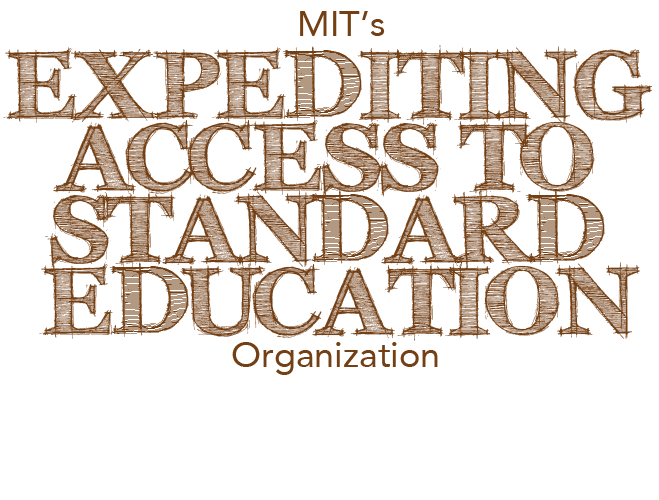
<style>
.page{position:relative;width:659px;height:500px;background:#ffffff}
.page>*{position:absolute;margin:0}
.t1{font:36px "Avenir-Roman";color:#733f14}
.t2{font:95px/72px "FFFTusj-Bold";color:#733f14}
</style>
<div class="page">
<p class="t1" style="left:300px;top:11px;width:85px;height:25px">MIT’s</p>
<p class="t2" style="left:3px;top:45px;width:649px;height:296px;text-align:center">EXPEDITING <br>ACCESS TO <br>STANDARD <br>EDUCATION</p>
<p class="t1" style="left:232px;top:342px;width:206px;height:33px">Organization</p>
</div>
